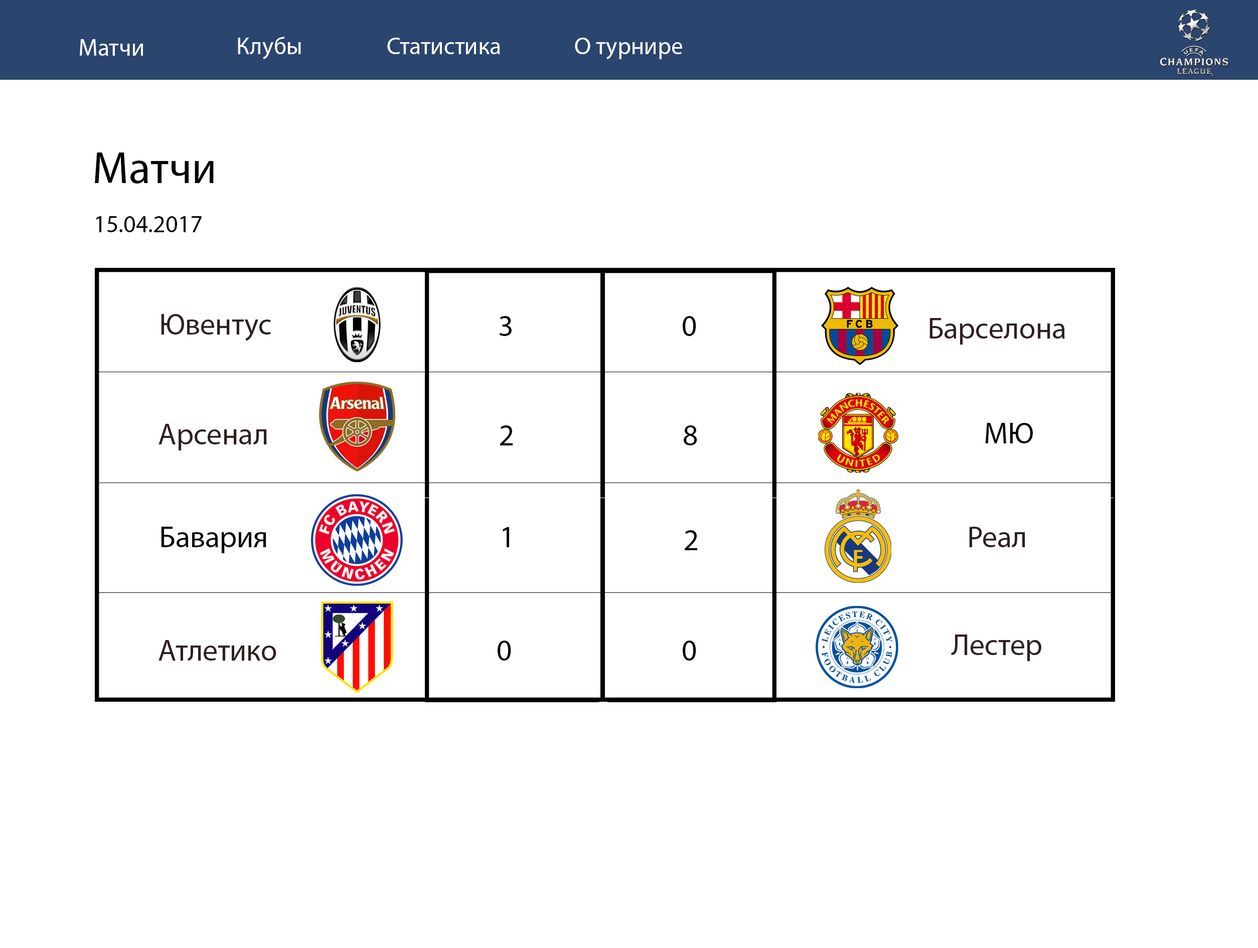
<style>
.page{position:relative;width:1258px;height:948px;background:#ffffff}
.page>*{position:absolute;margin:0}
.t1{font:24.1px "MyriadPro-Regular";color:#ffffff}
.t2{font:45.1px "MyriadPro-Regular";color:#000000}
.t3{font:24.1px "MyriadPro-Regular";color:#000000}
.t4{font:30.1px "MyriadPro-Regular";color:#2e2020}
.t5{font:30.1px "MyriadPro-Regular";color:#000000}
.t6{font:30.1px "MyriadPro-Regular";color:#040404}
</style>
<div class="page">
<p class="t1" style="left:80px;top:39px;width:63px;height:17px">Матчи</p>
<p class="t1" style="left:238px;top:37px;width:63px;height:22px">Клубы</p>
<p class="t1" style="left:387px;top:38px;width:113px;height:16px">Статистика</p>
<p class="t1" style="left:575px;top:38px;width:107px;height:21px">О турнире</p>
<p class="t2" style="left:95px;top:152px;width:119px;height:32px">Матчи</p>
<p class="t3" style="left:96px;top:216px;width:106px;height:16px">15.04.2017</p>
<p class="t4" style="left:161px;top:314px;width:110px;height:27px">Ювентус</p>
<p class="t5" style="left:499px;top:316px;width:13px;height:20px">3</p>
<p class="t5" style="left:683px;top:316px;width:13px;height:20px">0</p>
<p class="t4" style="left:929px;top:318px;width:136px;height:27px">Барселона</p>
<p class="t4" style="left:158px;top:424px;width:109px;height:26px">Арсенал</p>
<p class="t5" style="left:500px;top:425px;width:13px;height:20px">2</p>
<p class="t6" style="left:684px;top:425px;width:13px;height:20px">8</p>
<p class="t6" style="left:985px;top:423px;width:48px;height:20px">МЮ</p>
<p class="t6" style="left:161px;top:527px;width:105px;height:26px">Бавария</p>
<p class="t6" style="left:503px;top:527px;width:6px;height:20px">1</p>
<p class="t6" style="left:685px;top:530px;width:12px;height:20px">2</p>
<p class="t4" style="left:969px;top:527px;width:56px;height:20px">Реал</p>
<p class="t4" style="left:158px;top:640px;width:118px;height:21px">Атлетико</p>
<p class="t5" style="left:498px;top:640px;width:13px;height:21px">0</p>
<p class="t5" style="left:683px;top:640px;width:13px;height:21px">0</p>
<p class="t4" style="left:951px;top:634px;width:90px;height:27px">Лестер</p>
</div>
